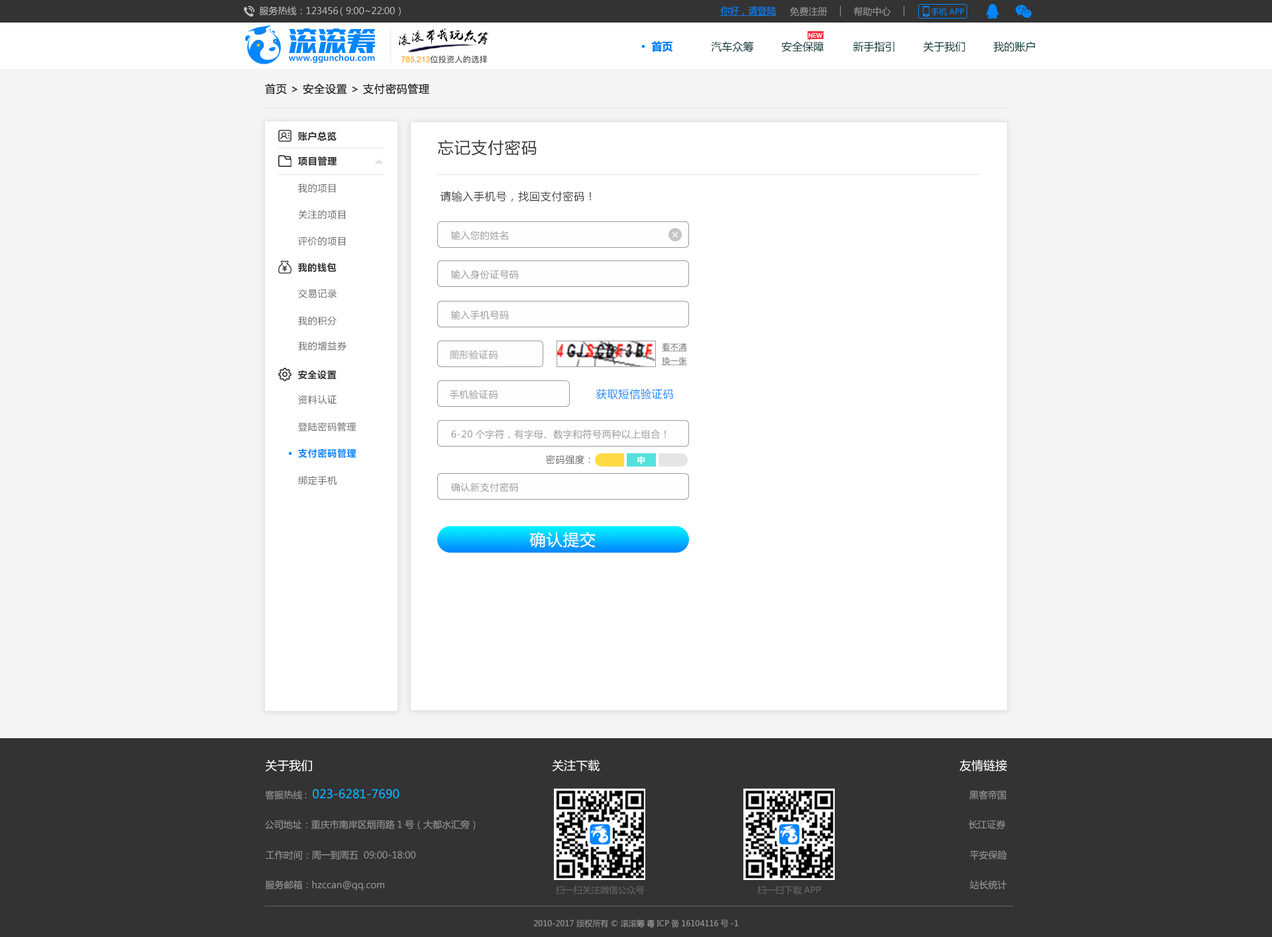
<style>
.page{position:relative;width:1272px;height:937px;background:#ffffff}
.page>*{position:absolute;margin:0}
.t1{font:9.3px "MicrosoftYaHei";color:#c4c4c4}
.t2{font:9.3px "MicrosoftYaHei";color:#0386ff;text-decoration:underline}
.t3{font:9.3px "MicrosoftYaHei";color:#999999}
.t4{font:8px "MicrosoftYaHei";color:#0386ff}
.t5{font:10.6px "MicrosoftYaHei-Bold";color:#0386ff}
.t6{font:10.6px "MicrosoftYaHei";color:#033333}
.t7{font:6px "MicrosoftYaHei";color:#ffffff}
.t8{font:8.3px "MicrosoftYaHei-Bold";color:#0386ff}
.t9{font:10.6px "MicrosoftYaHei";letter-spacing:0.05em;color:#333333}
.t10{font:9.3px "MicrosoftYaHei-Bold";letter-spacing:0.05em;color:#333333}
.t11{font:15.9px "MicrosoftYaHei";letter-spacing:0.05em;color:#333333}
.t12{font:9.3px "MicrosoftYaHei";letter-spacing:0.05em;color:#666666}
.t13{font:9.3px "MicrosoftYaHei";letter-spacing:0.05em;color:#999999}
.t14{font:8px "MicrosoftYaHei";letter-spacing:0.05em;color:#666666;text-decoration:underline}
.t15{font:10.6px "MicrosoftYaHei";letter-spacing:0.05em;color:#0386ff}
.t16{font:9.3px "MicrosoftYaHei-Bold";letter-spacing:0.05em;color:#0386ff}
.t17{font:8px "MicrosoftYaHei-Bold";letter-spacing:0.05em;color:#ffffff}
.t18{font:15.9px "MicrosoftYaHei";letter-spacing:0.05em;color:#ffffff}
.t19{font:11.9px "MicrosoftYaHei";color:#fffefe}
.t20{font:11.9px "MicrosoftYaHei";color:#03b6ff}
.t21{font:8.9px "MicrosoftYaHei";color:#666666}
.t22{font:8px "MicrosoftYaHei";color:#999999}
</style>
<div class="page">
<p class="t1" style="left:259px;top:6px;width:142px;height:10px">服务热线：123456 （9:00~22:00）</p>
<p class="t2" style="left:720px;top:6px;width:57px;height:10px">你好，请登陆</p>
<p class="t3" style="left:790px;top:7px;width:38px;height:10px">免费注册</p>
<p class="t3" style="left:854px;top:7px;width:37px;height:10px">帮助中心</p>
<p class="t4" style="left:931px;top:8px;width:33px;height:8px">手机APP</p>
<p class="t5" style="left:651px;top:41px;width:22px;height:11px">首页</p>
<p class="t6" style="left:711px;top:41px;width:43px;height:11px">汽车众筹</p>
<p class="t6" style="left:781px;top:41px;width:43px;height:11px">安全保障</p>
<p class="t7" style="left:809px;top:32px;width:14px;height:6px">NEW</p>
<p class="t6" style="left:853px;top:41px;width:42px;height:11px">新手指引</p>
<p class="t6" style="left:923px;top:41px;width:43px;height:11px">关于我们</p>
<p class="t6" style="left:993px;top:41px;width:42px;height:11px">我的账户</p>
<p class="t8" style="left:289px;top:54px;width:86px;height:9px">www.ggunchou.com</p>
<p class="t9" style="left:265px;top:84px;width:164px;height:11px">首页 &gt; 安全设置 &gt; 支付密码管理</p>
<p class="t10" style="left:298px;top:131px;width:39px;height:10px">账户总览</p>
<p class="t11" style="left:438px;top:140px;width:99px;height:16px">忘记支付密码</p>
<p class="t10" style="left:298px;top:156px;width:39px;height:10px">项目管理</p>
<p class="t12" style="left:298px;top:184px;width:38px;height:9px">我的项目</p>
<p class="t9" style="left:440px;top:191px;width:151px;height:11px">请输入手机号，找回支付密码！</p>
<p class="t12" style="left:298px;top:210px;width:47px;height:9px">关注的项目</p>
<p class="t13" style="left:451px;top:231px;width:57px;height:10px">输入您的姓名</p>
<p class="t12" style="left:298px;top:237px;width:47px;height:9px">评价的项目</p>
<p class="t10" style="left:298px;top:262px;width:39px;height:10px">我的钱包</p>
<p class="t13" style="left:451px;top:270px;width:67px;height:10px">输入身份证号码</p>
<p class="t12" style="left:298px;top:289px;width:39px;height:9px">交易记录</p>
<p class="t12" style="left:298px;top:316px;width:39px;height:9px">我的积分</p>
<p class="t13" style="left:451px;top:310px;width:58px;height:10px">输入手机号码</p>
<p class="t12" style="left:298px;top:341px;width:49px;height:10px">我的增益券</p>
<p class="t13" style="left:450px;top:350px;width:48px;height:9px">图形验证码</p>
<p class="t14" style="left:662px;top:343px;width:25px;height:23px;text-align:center">看不清<br>换一张</p>
<p class="t10" style="left:298px;top:370px;width:39px;height:10px">安全设置</p>
<p class="t13" style="left:450px;top:390px;width:48px;height:9px">手机验证码</p>
<p class="t15" style="left:596px;top:389px;width:77px;height:11px">获取短信验证码</p>
<p class="t12" style="left:298px;top:395px;width:39px;height:9px">资料认证</p>
<p class="t12" style="left:298px;top:422px;width:59px;height:9px">登陆密码管理</p>
<p class="t13" style="left:451px;top:429px;width:215px;height:10px">6-20个字符，有字母、数字和符号两种以上组合！</p>
<p class="t16" style="left:298px;top:449px;width:59px;height:9px">支付密码管理</p>
<p class="t12" style="left:546px;top:455px;width:44px;height:10px">密码强度：</p>
<p class="t17" style="left:638px;top:456px;width:7px;height:9px">中</p>
<p class="t12" style="left:298px;top:476px;width:39px;height:9px">绑定手机</p>
<p class="t13" style="left:451px;top:482px;width:67px;height:10px">确认新支付密码</p>
<p class="t18" style="left:530px;top:532px;width:66px;height:16px">确认提交</p>
<p class="t19" style="left:265px;top:759px;width:47px;height:12px">关于我们</p>
<p class="t19" style="left:552px;top:759px;width:48px;height:12px">关注下载</p>
<p class="t19" style="left:960px;top:759px;width:47px;height:12px">友情链接</p>
<p class="t20" style="left:265px;top:789px;width:135px;height:11px"><span class="t3">客服热线:  </span>023-6281-7690</p>
<p class="t3" style="left:970px;top:790px;width:37px;height:10px">黑客帝国</p>
<p class="t3" style="left:265px;top:820px;width:211px;height:10px">公司地址：重庆市南岸区烟雨路1号（大都水汇旁）</p>
<p class="t3" style="left:969px;top:820px;width:37px;height:10px">长江证券</p>
<p class="t3" style="left:266px;top:850px;width:150px;height:10px">工作时间：周一到周五  09:00-18:00</p>
<p class="t3" style="left:970px;top:850px;width:37px;height:10px">平安保险</p>
<p class="t3" style="left:265px;top:880px;width:119px;height:11px">服务邮箱：hzccan@qq.com</p>
<p class="t3" style="left:970px;top:880px;width:37px;height:9px">站长统计</p>
<p class="t21" style="left:556px;top:885px;width:89px;height:10px">扫一扫关注微信公众号</p>
<p class="t21" style="left:758px;top:885px;width:63px;height:10px">扫一扫下载APP</p>
<p class="t22" style="left:534px;top:919px;width:205px;height:9px">2010-2017 版权所有 © 滚滚筹 粤ICP备16104116号-1</p>
</div>
